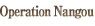
<style>
.page{position:relative;width:95px;height:26px;background:#ffffff}
.page>*{position:absolute;margin:0}
.t1{font:14px "RyuminPro-ExBold";letter-spacing:-0.08em;color:#6c583f;font-weight:bold;scale:0.85 1}
</style>
<div class="page">
<p class="t1" style="left:0px;top:5px;width:94px;height:14px">Operation Nangou</p>
</div>
